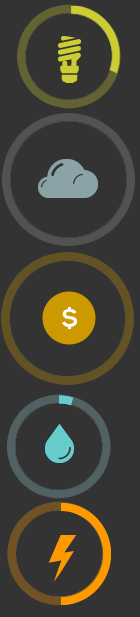
<style>
.page{position:relative;width:140px;height:617px;background:#333333}
.page>*{position:absolute;margin:0}
.t1{font:24px "NexaBold";color:#ffffff}
</style>
<div class="page">
<p class="t1" style="left:62px;top:307px;width:15px;height:22px">$</p>
</div>
